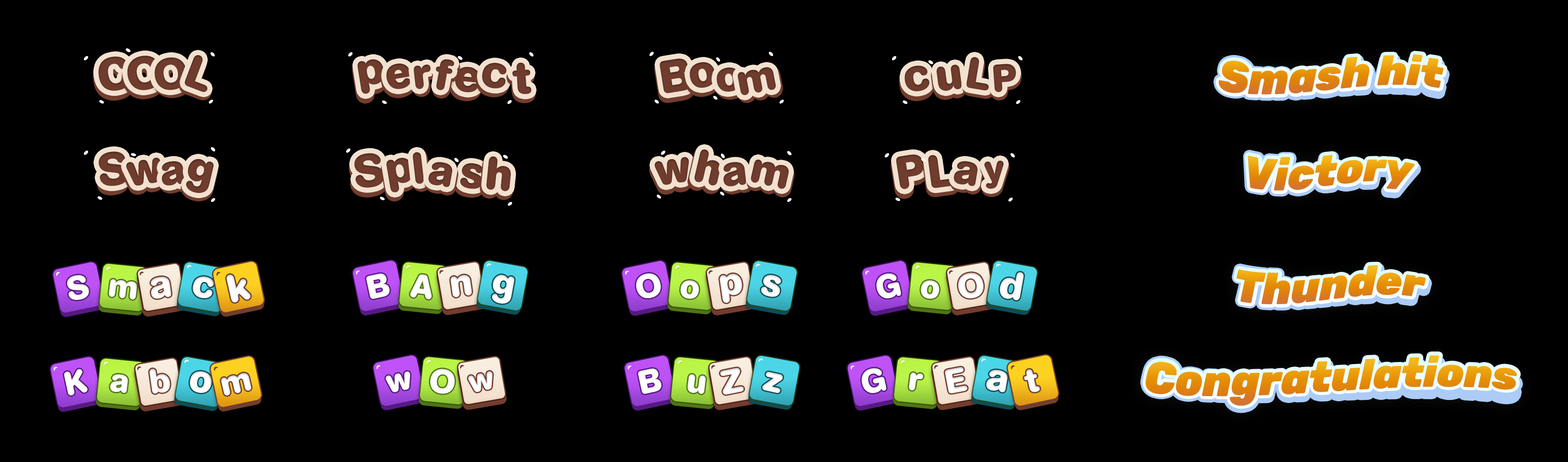
<style>
.page{position:relative;width:1568px;height:462px;background:#000000}
.page>*{position:absolute;margin:0}
.t1{font:42.8px "Rubik-BlackItalic";letter-spacing:-0.01em;color:#e38a0d}
.t2{font:42.8px "Rubik-BlackItalic";letter-spacing:-0.01em}
.t3{font:45.9px "AGBookRounded-Bold";color:#703c2e}
.t4{font:43.5px "AGBookRounded-Bold";color:#703c2e}
.t5{font:38.5px "AGBookRounded-Bold";color:#703c2e}
.t6{font:42.8px "Rubik-BlackItalic";letter-spacing:-0.01em;color:#e48c0c}
.t7{font:33.2px "AGBookRounded-Bold";color:#fffefe}
.t8{font:33.2px "AGBookRounded-Bold";color:#ffffff}
.t9{font:39px "AGBookRounded-Bold";color:#ffffff}
.t10{font:34.2px "AGBookRounded-Bold";color:#ffffff}
.t11{font:42.8px "Rubik-BlackItalic";letter-spacing:-0.01em;color:#e6910a}
.t12{font:42.8px "Rubik-BlackItalic";letter-spacing:-0.01em;color:#e7910a}
.t13{font:32.9px "AGBookRounded-Bold";color:#ffffff}
.t14{font:36.4px "AGBookRounded-Bold";color:#ffffff}
</style>
<div class="page">
<p class="t1" style="left:1218px;top:54px;width:226px;height:41px">Smash hit</p>
<p class="t2" style="left:1219px;top:54px;width:225px;height:41px">Smash hit</p>
<p class="t3" style="left:98px;top:56px;width:32px;height:35px;rotate:-9deg">C</p>
<p class="t3" style="left:127px;top:56px;width:35px;height:34px;rotate:-10deg">O</p>
<p class="t4" style="left:154px;top:57px;width:33px;height:33px;rotate:-6deg">O</p>
<p class="t3" style="left:184px;top:58px;width:23px;height:37px;rotate:21deg">L</p>
<p class="t3" style="left:185px;top:55px;width:22px;height:37px;rotate:21deg">L</p>
<p class="t3" style="left:357px;top:59px;width:27px;height:35px;rotate:-9deg">p</p>
<p class="t3" style="left:386px;top:63px;width:25px;height:26px;rotate:-10deg">e</p>
<p class="t4" style="left:414px;top:65px;width:17px;height:24px;rotate:-6deg">r</p>
<p class="t4" style="left:436px;top:59px;width:18px;height:31px;rotate:10deg">f</p>
<p class="t3" style="left:482px;top:63px;width:25px;height:26px;rotate:6deg">c</p>
<p class="t3" style="left:512px;top:62px;width:19px;height:32px;rotate:-4deg">t</p>
<p class="t3" style="left:660px;top:59px;width:31px;height:34px;rotate:-9deg">B</p>
<p class="t3" style="left:690px;top:62px;width:25px;height:26px;rotate:-10deg">o</p>
<p class="t3" style="left:904px;top:65px;width:26px;height:27px;rotate:-9deg">c</p>
<p class="t3" style="left:937px;top:65px;width:25px;height:26px;rotate:-8deg">u</p>
<p class="t4" style="left:966px;top:57px;width:23px;height:34px;rotate:9deg">L</p>
<p class="t5" style="left:993px;top:64px;width:23px;height:28px;rotate:-4deg">P</p>
<p class="t2" style="left:1219px;top:59px;width:225px;height:36px;rotate:2deg">Smash hit</p>
<p class="t3" style="left:455px;top:67px;width:25px;height:25px;rotate:6deg">e</p>
<p class="t4" style="left:717px;top:67px;width:24px;height:25px;rotate:-6deg">o</p>
<p class="t4" style="left:738px;top:67px;width:38px;height:28px;rotate:-11deg">m</p>
<p class="t3" style="left:694px;top:149px;width:26px;height:37px;rotate:13deg">h</p>
<p class="t3" style="left:98px;top:151px;width:31px;height:35px;rotate:-9deg">S</p>
<p class="t3" style="left:126px;top:157px;width:34px;height:29px;rotate:-10deg">w</p>
<p class="t4" style="left:162px;top:161px;width:22px;height:25px;rotate:-6deg">a</p>
<p class="t3" style="left:186px;top:159px;width:28px;height:34px;rotate:13deg">g</p>
<p class="t3" style="left:354px;top:153px;width:30px;height:35px;rotate:-9deg">S</p>
<p class="t3" style="left:386px;top:158px;width:27px;height:35px;rotate:-10deg">p</p>
<p class="t4" style="left:413px;top:152px;width:11px;height:32px;rotate:-6deg">l</p>
<p class="t4" style="left:415px;top:155px;width:11px;height:32px;rotate:-6deg">l</p>
<p class="t3" style="left:485px;top:160px;width:25px;height:35px;rotate:6deg">h</p>
<p class="t3" style="left:486px;top:156px;width:25px;height:35px;rotate:6deg">h</p>
<p class="t3" style="left:655px;top:157px;width:34px;height:28px;rotate:-9deg">w</p>
<p class="t3" style="left:693px;top:153px;width:25px;height:36px;rotate:13deg">h</p>
<p class="t4" style="left:723px;top:162px;width:23px;height:25px;rotate:-6deg">a</p>
<p class="t4" style="left:751px;top:160px;width:38px;height:29px;rotate:13deg">m</p>
<p class="t3" style="left:896px;top:154px;width:28px;height:35px;rotate:-9deg">P</p>
<p class="t3" style="left:928px;top:155px;width:27px;height:33px;rotate:-8deg">L</p>
<p class="t4" style="left:954px;top:161px;width:24px;height:25px;rotate:9deg">a</p>
<p class="t5" style="left:984px;top:160px;width:20px;height:29px;rotate:-4deg">y</p>
<p class="t2" style="left:1248px;top:154px;width:167px;height:37px">Victory</p>
<p class="t2" style="left:1248px;top:154px;width:167px;height:37px">Victory</p>
<p class="t2" style="left:1248px;top:155px;width:168px;height:38px;rotate:2deg">Victory</p>
<p class="t4" style="left:428px;top:162px;width:24px;height:25px;rotate:10deg">a</p>
<p class="t3" style="left:460px;top:163px;width:23px;height:26px;rotate:6deg">s</p>
<p class="t5" style="left:985px;top:164px;width:20px;height:28px;rotate:-4deg">y</p>
<p class="t6" style="left:1236px;top:265px;width:190px;height:40px">Thunder</p>
<p class="t2" style="left:1237px;top:265px;width:189px;height:40px">Thunder</p>
<p class="t2" style="left:1237px;top:269px;width:190px;height:36px;rotate:2deg">Thunder</p>
<p class="t7" style="left:67px;top:275px;width:22px;height:25px;rotate:-12deg">S</p>
<p class="t8" style="left:109px;top:279px;width:28px;height:20px;rotate:7deg">m</p>
<p class="t9" style="left:151px;top:277px;width:21px;height:22px;rotate:-8deg">a</p>
<p class="t9" style="left:193px;top:276px;width:21px;height:22px;rotate:10deg">c</p>
<p class="t9" style="left:226px;top:275px;width:25px;height:27px;rotate:-13deg">k</p>
<p class="t7" style="left:366px;top:273px;width:24px;height:26px;rotate:-12deg">B</p>
<p class="t8" style="left:410px;top:274px;width:22px;height:25px;rotate:7deg">A</p>
<p class="t9" style="left:451px;top:275px;width:21px;height:22px;rotate:-8deg">n</p>
<p class="t9" style="left:492px;top:275px;width:22px;height:29px;rotate:10deg">g</p>
<p class="t7" style="left:636px;top:273px;width:25px;height:25px;rotate:-12deg">O</p>
<p class="t8" style="left:680px;top:280px;width:19px;height:19px;rotate:7deg">o</p>
<p class="t9" style="left:720px;top:274px;width:22px;height:29px;rotate:-8deg">p</p>
<p class="t9" style="left:761px;top:275px;width:20px;height:22px;rotate:10deg">s</p>
<p class="t7" style="left:876px;top:273px;width:25px;height:26px;rotate:-12deg">G</p>
<p class="t8" style="left:921px;top:280px;width:19px;height:19px;rotate:7deg">o</p>
<p class="t10" style="left:958px;top:273px;width:26px;height:26px;rotate:-8deg">O</p>
<p class="t9" style="left:1000px;top:272px;width:24px;height:28px;rotate:10deg">d</p>
<p class="t11" style="left:1145px;top:355px;width:372px;height:51px">Congratulations</p>
<p class="t2" style="left:1146px;top:361px;width:372px;height:47px;rotate:2deg">Congratulations</p>
<p class="t12" style="left:1146px;top:355px;width:372px;height:51px">Congratulations</p>
<p class="t7" style="left:64px;top:369px;width:24px;height:27px;rotate:-12deg">K</p>
<p class="t8" style="left:110px;top:374px;width:18px;height:19px;rotate:7deg">a</p>
<p class="t10" style="left:149px;top:369px;width:21px;height:25px;rotate:-8deg">b</p>
<p class="t9" style="left:190px;top:371px;width:22px;height:22px;rotate:10deg">o</p>
<p class="t10" style="left:221px;top:373px;width:31px;height:23px;rotate:-13deg">m</p>
<p class="t7" style="left:385px;top:371px;width:25px;height:21px;rotate:-12deg">w</p>
<p class="t8" style="left:430px;top:369px;width:25px;height:25px;rotate:7deg">O</p>
<p class="t13" style="left:468px;top:371px;width:24px;height:21px;rotate:-13deg">w</p>
<p class="t7" style="left:638px;top:368px;width:23px;height:26px;rotate:-12deg">B</p>
<p class="t10" style="left:688px;top:374px;width:18px;height:20px;rotate:7deg">u</p>
<p class="t10" style="left:720px;top:368px;width:24px;height:27px;rotate:-11deg">Z</p>
<p class="t14" style="left:762px;top:372px;width:21px;height:21px;rotate:12deg">z</p>
<p class="t7" style="left:862px;top:368px;width:24px;height:25px;rotate:-12deg">G</p>
<p class="t8" style="left:909px;top:373px;width:14px;height:18px;rotate:7deg">r</p>
<p class="t10" style="left:945px;top:367px;width:22px;height:27px;rotate:-11deg">E</p>
<p class="t9" style="left:986px;top:370px;width:22px;height:22px;rotate:10deg">a</p>
<p class="t10" style="left:1024px;top:369px;width:16px;height:23px;rotate:-13deg">t</p>
</div>
